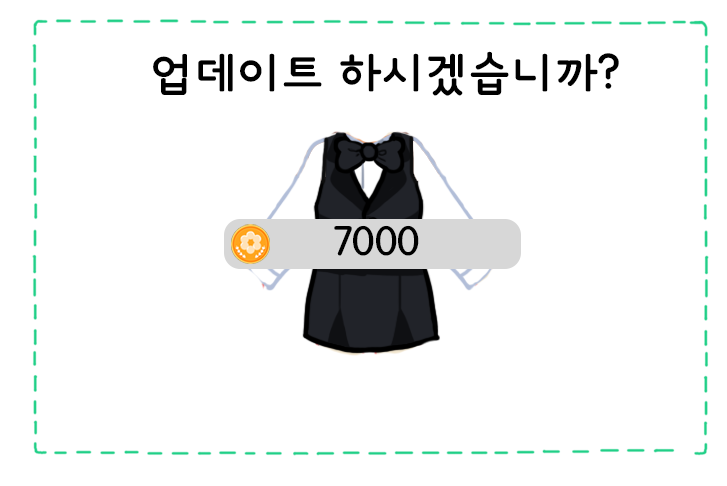
<style>
.page{position:relative;width:727px;height:486px;background:#ffffff}
.page>*{position:absolute;margin:0}
.t1{font:48px "DXLBaB-KSCpc-EUC-H";color:#000000}
.t2{font:40px "DXLBaB-KSCpc-EUC-H";color:#000000}
</style>
<div class="page">
<p class="t1" style="left:153px;top:51px;width:466px;height:45px">업데이트 하시겠습니까?</p>
<p class="t2" style="left:334px;top:225px;width:85px;height:31px">7000<br><br>000000<br><br>000000<br>00000<br>0000</p>
</div>
